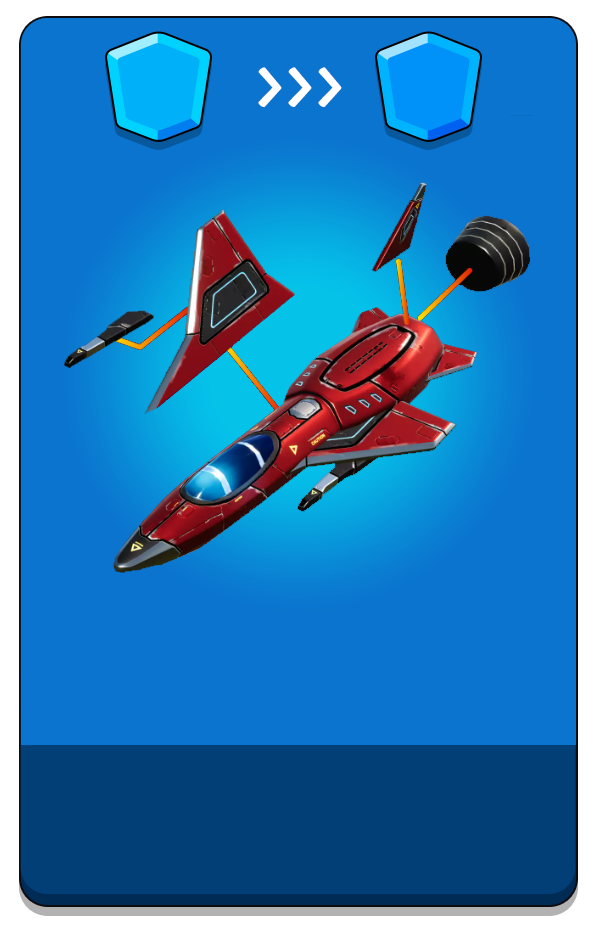
<style>
.page{position:relative;width:596px;height:928px;background:#0b74ce}
.page>*{position:absolute;margin:0}
.t1{font:66.8px "LilitaOne";color:#ffffff}
</style>
<div class="page">
<p class="t1" style="left:258px;top:67px;width:24px;height:40px">&gt;</p>
<p class="t1" style="left:288px;top:67px;width:24px;height:40px">&gt;</p>
<p class="t1" style="left:318px;top:67px;width:24px;height:40px">&gt;</p>
</div>
